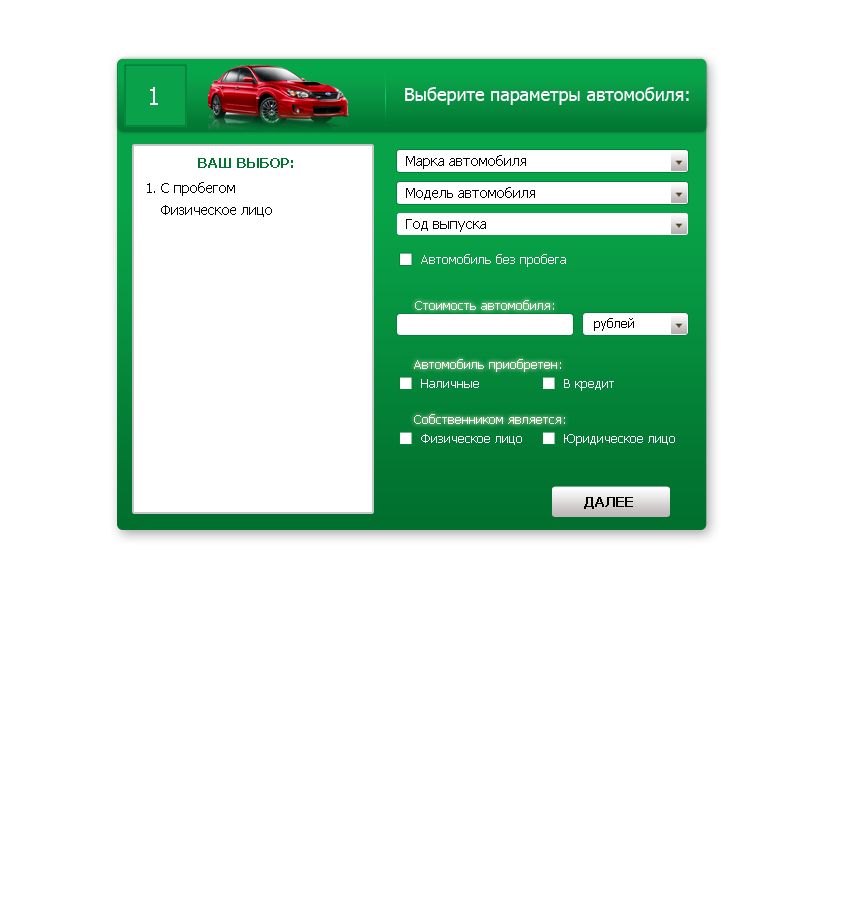
<style>
.page{position:relative;width:843px;height:900px;background:#ffffff}
.page>*{position:absolute;margin:0}
.t1{font:24px "Tahoma";color:#ffffff}
.t2{font:18px "Tahoma";color:#ffffff}
.t3{font:14px "Tahoma-Bold";color:#027531;text-transform:uppercase}
.t4{font:14px "Tahoma";color:#000000}
.t5{font:14px/22px "Tahoma";color:#000000}
.t6{font:13px "Tahoma";color:#ffffff}
.t7{font:13px "Tahoma";color:#000000}
.t8{font:14px "Tahoma-Bold";color:#000000;text-transform:uppercase}
</style>
<div class="page">
<p class="t1" style="left:150px;top:87px;width:8px;height:18px">1</p>
<p class="t2" style="left:405px;top:87px;width:284px;height:18px">Выберите параметры автомобиля:</p>
<p class="t3" style="left:198px;top:158px;width:95px;height:10px">Ваш Выбор:</p>
<p class="t4" style="left:406px;top:155px;width:120px;height:14px">Марка автомобиля</p>
<p class="t5" style="left:147px;top:182px;width:125px;height:35px;text-align:justify">1. С пробегом<br>    Физическое лицо</p>
<p class="t4" style="left:406px;top:187px;width:129px;height:13px">Модель автомобиля</p>
<p class="t4" style="left:406px;top:219px;width:80px;height:13px">Год выпуска</p>
<p class="t6" style="left:421px;top:254px;width:145px;height:13px">Автомобиль без пробега</p>
<p class="t6" style="left:415px;top:300px;width:139px;height:10px">Стоимость автомобиля:</p>
<p class="t7" style="left:594px;top:318px;width:40px;height:13px">рублей</p>
<p class="t6" style="left:414px;top:359px;width:147px;height:13px">Автомобиль приобретен:</p>
<p class="t6" style="left:421px;top:379px;width:58px;height:9px">Наличные</p>
<p class="t6" style="left:564px;top:379px;width:50px;height:12px">В кредит</p>
<p class="t6" style="left:414px;top:414px;width:151px;height:10px">Собственником является:</p>
<p class="t6" style="left:421px;top:434px;width:101px;height:11px">Физическое лицо</p>
<p class="t6" style="left:564px;top:434px;width:111px;height:12px">Юридическое лицо</p>
<p class="t8" style="left:584px;top:497px;width:49px;height:12px">Далее</p>
</div>
